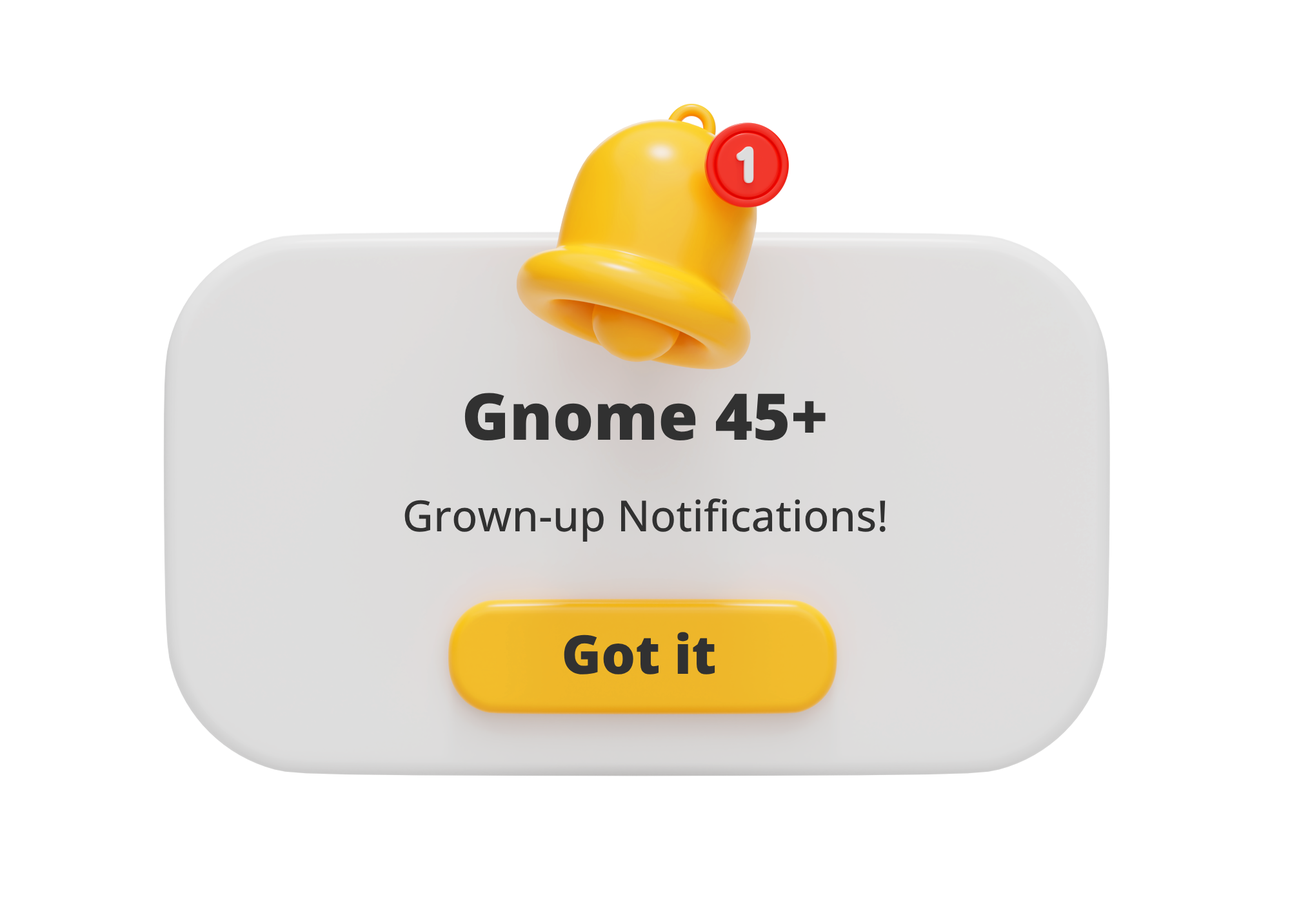
<style>
.page{position:relative;width:1290px;height:924px;background:#ffffff}
.page>*{position:absolute;margin:0}
.t1{font:64.5px "OpenSans-ExtraBold";color:#313131}
.t2{font:43px "OpenSans-Medium";color:#313131}
.t3{font:53.7px "OpenSans-ExtraBold";color:#313131}
</style>
<div class="page">
<p class="t1" style="left:464px;top:393px;width:362px;height:48px">Gnome 45+</p>
<p class="t2" style="left:404px;top:499px;width:482px;height:43px">Grown-up Notifications!</p>
<p class="t3" style="left:564px;top:632px;width:151px;height:43px">Got it</p>
</div>
